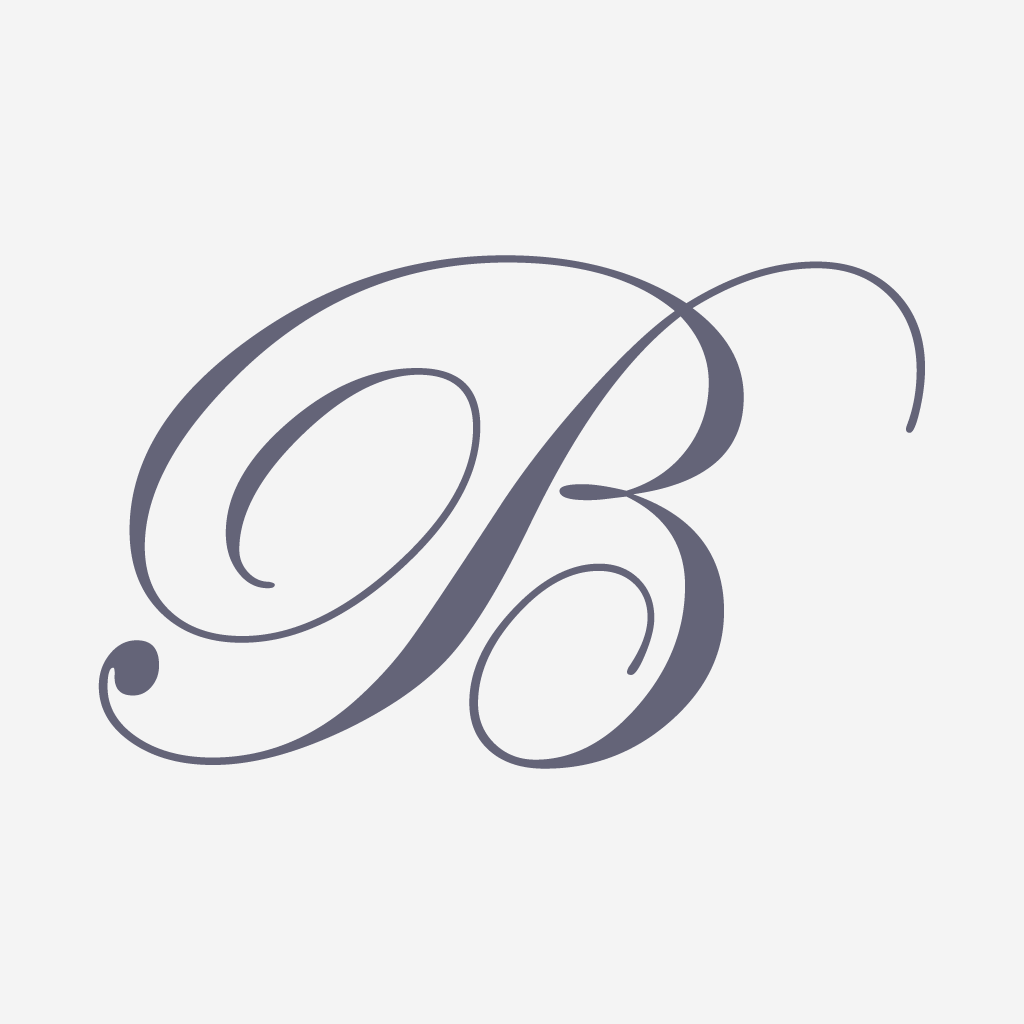
<style>
.page{position:relative;width:1024px;height:1024px;background:#f4f4f4}
.page>*{position:absolute;margin:0}
.t1{font:750px "EdwardianScriptITC";color:#646478}
</style>
<div class="page">
<p class="t1" style="left:98px;top:255px;width:827px;height:514px">B</p>
</div>
